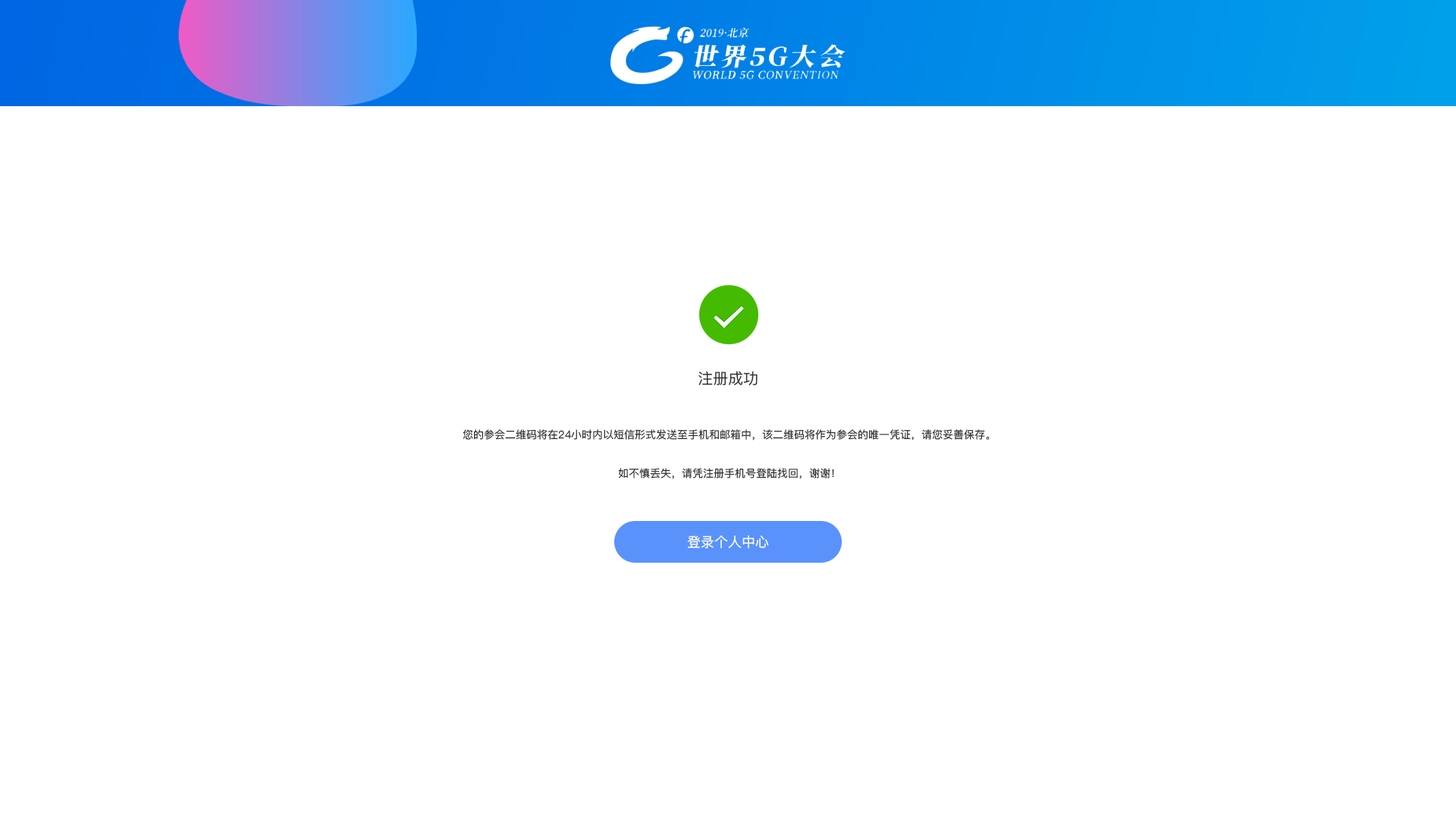
<style>
.page{position:relative;width:1456px;height:819px;background:#ffffff}
.page>*{position:absolute;margin:0}
.t1{font:15.2px "PingFangSC-Regular";color:#333333}
.t2{font:10.6px/27.3px "PingFangSC-Regular";color:#333333}
.t3{font:13.6px "PingFangSC-Regular";color:#ffffff}
</style>
<div class="page">
<p class="t1" style="left:698px;top:371px;width:60px;height:15px">注册成功</p>
<p class="t2" style="left:463px;top:429px;width:527px;height:50px;text-align:center">您的参会二维码将在24小时内以短信形式发送至手机和邮箱中，该二维码将作为参会的唯一凭证，请您妥善保存。<br>如不慎丢失，请凭注册手机号登陆找回，谢谢！</p>
<p class="t3" style="left:687px;top:535px;width:82px;height:13px">登录个人中心</p>
</div>
